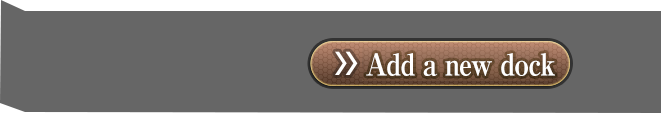
<style>
.page{position:relative;width:661px;height:113px;background:#666666}
.page>*{position:absolute;margin:0}
.t1{font:30px "RyuminPro-ExBold";letter-spacing:-0.04em;color:#ffffff;scale:0.9 1}
</style>
<div class="page">
<p class="t1" style="left:366px;top:53px;width:189px;height:23px">Add a new dock</p>
</div>
